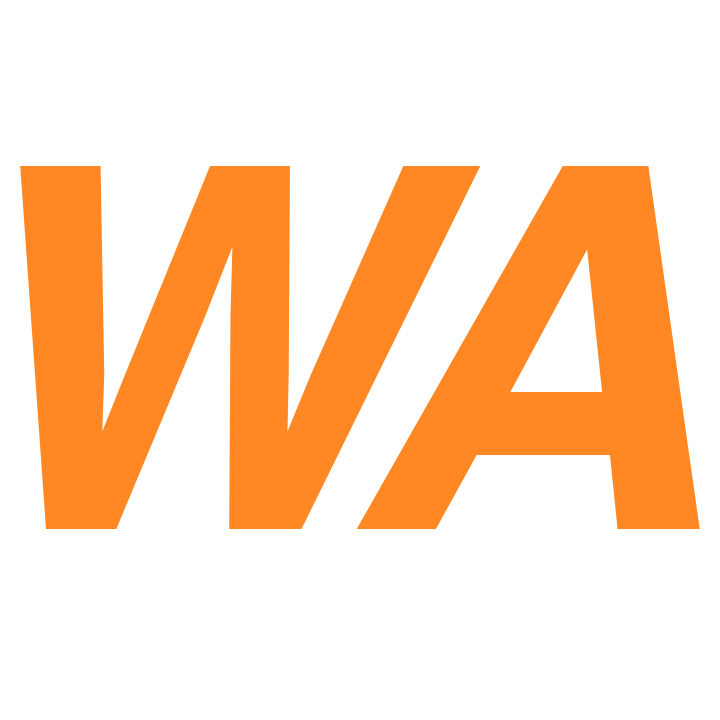
<style>
.page{position:relative;width:720px;height:720px;background:#ffffff}
.page>*{position:absolute;margin:0}
.t1{font:504px "Helvetica-BoldOblique";color:#ff8724}
</style>
<div class="page">
<p class="t1" style="left:20px;top:166px;width:680px;height:363px">WA</p>
</div>
